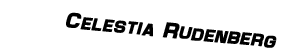
<style>
.page{position:relative;width:283px;height:56px;background:#ffffff}
.page>*{position:absolute;margin:0}
.t1{font:22px "Maximus";color:#000000;font-weight:bold;font-style:italic}
</style>
<div class="page">
<p class="t1" style="left:66px;top:12px;width:211px;height:36px;rotate:6deg">Celestia Rudenberg</p>
</div>
